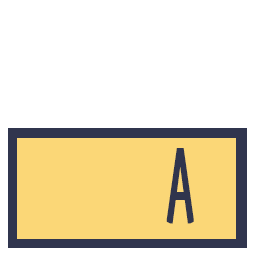
<style>
.page{position:relative;width:256px;height:256px;background:#ffffff}
.page>*{position:absolute;margin:0}
.t1{font:110px "OratorStd";letter-spacing:-0.14em;color:#30354d;font-weight:bold;scale:0.55 1}
</style>
<div class="page">
<p class="t1" style="left:166px;top:148px;width:28px;height:76px">A</p>
</div>
